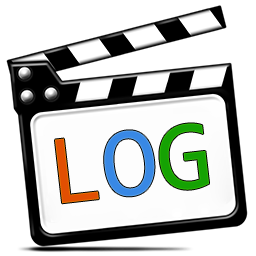
<style>
.page{position:relative;width:256px;height:256px;background:#ffffff}
.page>*{position:absolute;margin:0}
.t1{font:100px "Consolas";color:#e14f02}
.t2{font:100px "Consolas";color:#3888e5}
.t3{font:100px "Consolas";color:#15a203}
</style>
<div class="page">
<p class="t1" style="left:55px;top:123px;width:154px;height:81px;rotate:-6deg">L<span class="t2">O</span><span class="t3">G</span></p>
</div>
